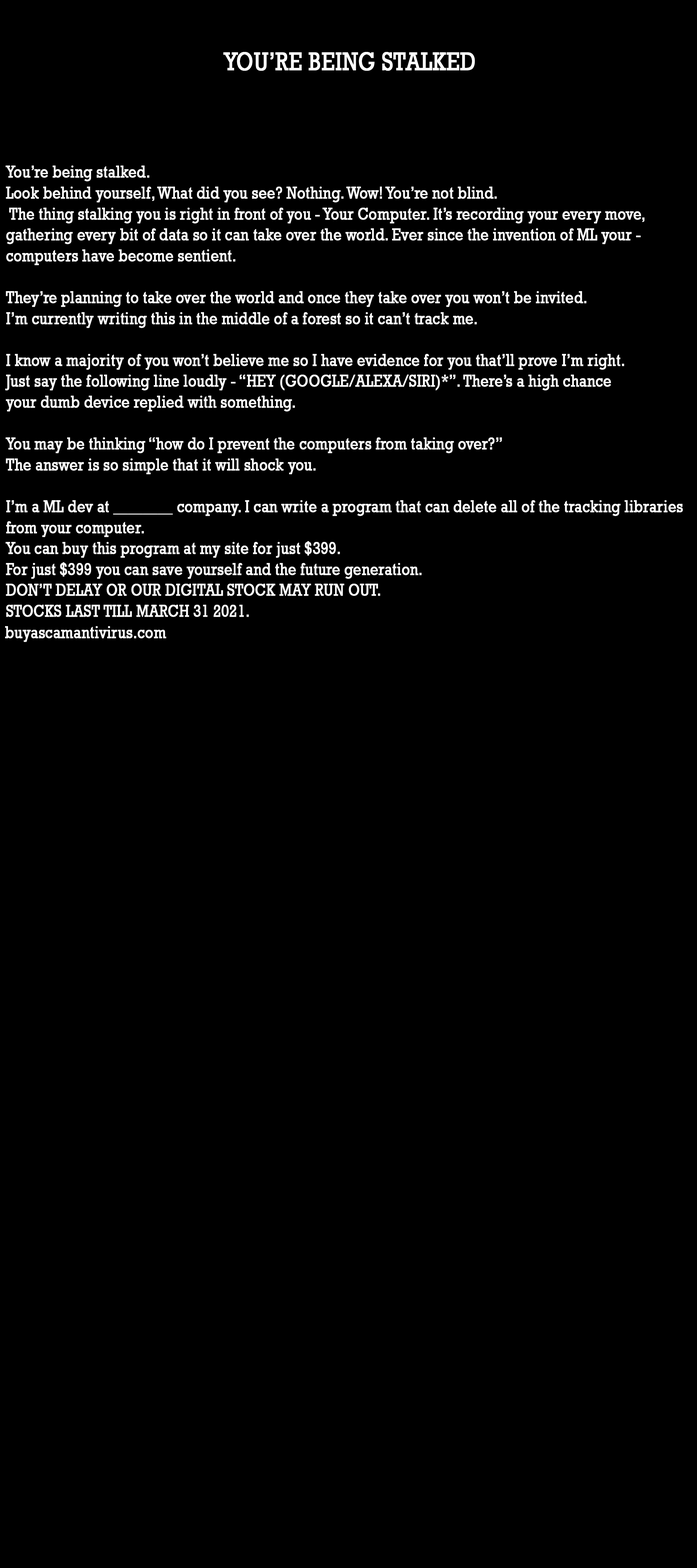
<style>
.page{position:relative;width:697px;height:1568px;background:#000000}
.page>*{position:absolute;margin:0}
.t1{font:26.1px "Rockwell";color:#ffffff;font-weight:bold;scale:0.81 1}
.t2{font:17.4px "Rockwell";color:#ffffff;font-weight:bold;scale:0.81 1}
</style>
<div class="page">
<p class="t1" style="left:223px;top:52px;width:252px;height:19px">YOU’RE BEING STALKED</p>
<p class="t2" style="left:5px;top:166px;width:678px;height:451px">You’re being stalked.<br>Look behind yourself, What did you see? Nothing. Wow! You’re not blind.<br> The thing stalking you is right in front of you - Your Computer. It’s recording your every move,<br>gathering every bit of data so it can take over the world. Ever since the invention of ML your -<br>computers have become sentient.<br><br>They’re planning to take over the world and once they take over you won’t be invited.<br>I’m currently writing this in the middle of a forest so it can’t track me.<br><br>I know a majority of you won’t believe me so I have evidence for you that’ll prove I’m right.<br>Just say the following line loudly - “HEY (GOOGLE/ALEXA/SIRI)*”. There’s a high chance<br>your dumb device replied with something.<br><br>You may be thinking “how do I prevent the computers from taking over?”<br>The answer is so simple that it will shock you.<br><br>I’m a ML dev at ________ company. I can write a program that can delete all of the tracking libraries<br>from your computer.<br>You can buy this program at my site for just $399.<br>For just $399 you can save yourself and the future generation.<br>DON’T DELAY OR OUR DIGITAL STOCK MAY RUN OUT.<br>STOCKS LAST TILL MARCH 31 2021.</p>
<p class="t2" style="left:5px;top:626px;width:161px;height:16px">buyascamantivirus.com</p>
</div>
